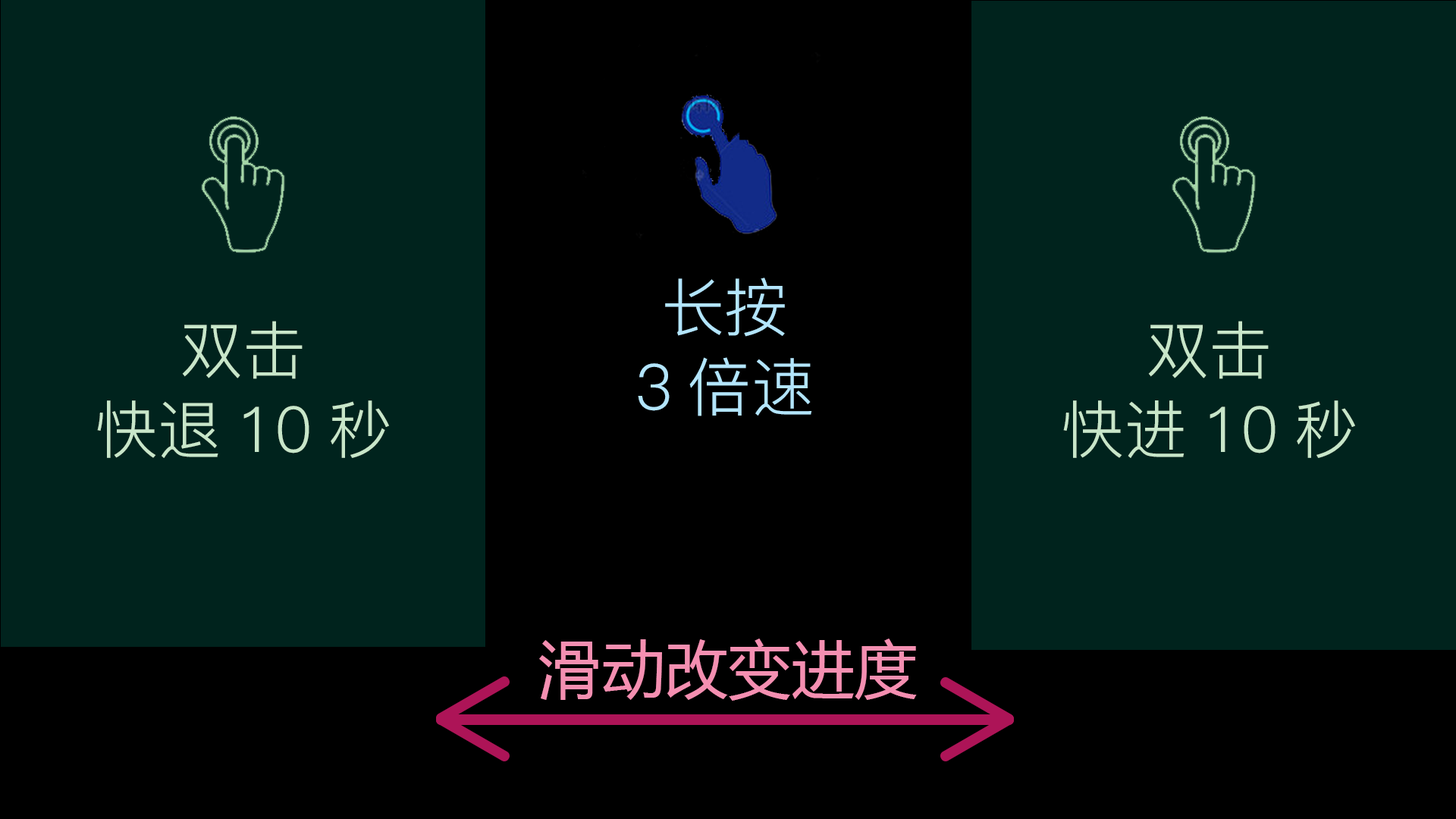
<style>
.page{position:relative;width:1456px;height:819px;background:#00231d}
.page>*{position:absolute;margin:0}
.t1{font:63.2px/79px "PingFang-SC-Regular";color:#b3e5fc}
.t2{font:63.2px/79px "PingFang-SC-Regular";color:#c8e6c9}
.t3{font:63.2px "MicrosoftYaHei";color:#f48fb1}
</style>
<div class="page">
<p class="t1" style="left:638px;top:278px;width:174px;height:138px;text-align:center">长按<br>3倍速</p>
<p class="t2" style="left:97px;top:321px;width:292px;height:137px;text-align:center">双击<br>快退10秒</p>
<p class="t2" style="left:1063px;top:321px;width:292px;height:137px;text-align:center">双击<br>快进10秒</p>
<p class="t3" style="left:539px;top:639px;width:378px;height:62px">滑动改变进度</p>
</div>
